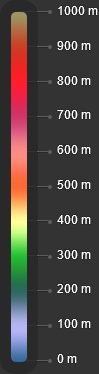
<style>
.page{position:relative;width:99px;height:374px;background:#333333}
.page>*{position:absolute;margin:0}
.t1{font:12px "ArialMT";color:#ffffff}
</style>
<div class="page">
<p class="t1" style="left:58px;top:6px;width:40px;height:9px">1000 m</p>
<p class="t1" style="left:57px;top:41px;width:34px;height:9px">900 m</p>
<p class="t1" style="left:57px;top:76px;width:34px;height:9px">800 m</p>
<p class="t1" style="left:57px;top:110px;width:34px;height:9px">700 m</p>
<p class="t1" style="left:57px;top:145px;width:34px;height:9px">600 m</p>
<p class="t1" style="left:57px;top:180px;width:34px;height:9px">500 m</p>
<p class="t1" style="left:57px;top:215px;width:34px;height:9px">400 m</p>
<p class="t1" style="left:57px;top:250px;width:34px;height:9px">300 m</p>
<p class="t1" style="left:57px;top:284px;width:34px;height:9px">200 m</p>
<p class="t1" style="left:58px;top:319px;width:33px;height:9px">100 m</p>
<p class="t1" style="left:57px;top:354px;width:20px;height:9px">0 m</p>
</div>
